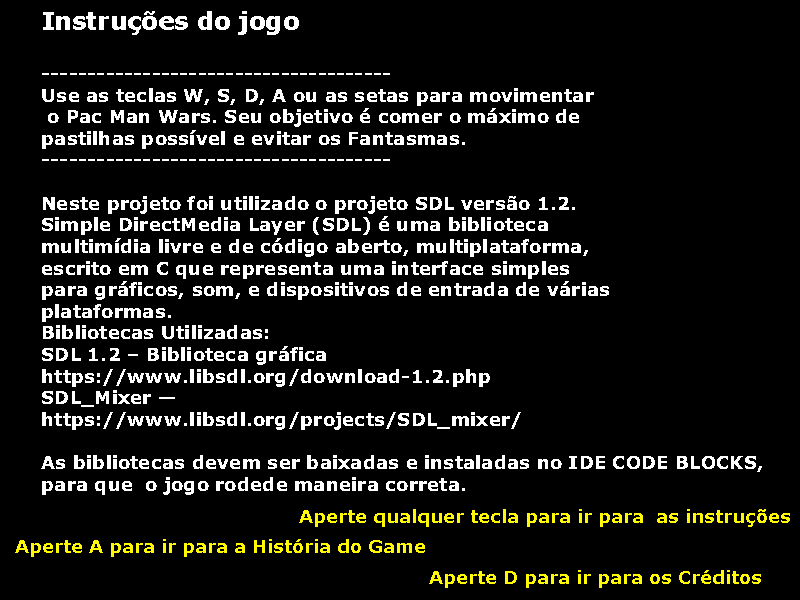
<style>
.page{position:relative;width:800px;height:600px;background:#000000}
.page>*{position:absolute;margin:0}
.t1{font:18px "Verdana-Bold";color:#ffffff}
.t2{font:24px "Verdana-Bold";color:#ffffff}
.t3{font:18px "Verdana-Bold";color:#fffa03}
</style>
<div class="page">
<p class="t1" style="left:41px;top:11px;width:721px;height:484px"><span class="t2">Instruções do jogo<br><br></span>--------------------------------------<br>Use as teclas W, S, D, A ou as setas para movimentar<br> o Pac Man Wars. Seu objetivo é comer o máximo de <br>pastilhas possível e evitar os Fantasmas.<br>--------------------------------------<br><br>Neste projeto foi utilizado o projeto SDL versão 1.2.<br>Simple DirectMedia Layer (SDL) é uma biblioteca<br>multimídia livre e de código aberto, multiplataforma,<br>escrito em C que representa uma interface simples<br>para gráficos, som, e dispositivos de entrada de várias<br>plataformas.<br>Bibliotecas Utilizadas:<br>SDL 1.2 – Biblioteca gráfica<br>https://www.libsdl.org/download-1.2.php<br>SDL_Mixer — <br>https://www.libsdl.org/projects/SDL_mixer/<br><br>As bibliotecas devem ser baixadas e instaladas no IDE CODE BLOCKS,<br>para que  o jogo rodede maneira correta.</p>
<p class="t3" style="left:299px;top:509px;width:491px;height:18px">Aperte qualquer tecla para ir para  as instruções</p>
<p class="t3" style="left:15px;top:539px;width:410px;height:18px">Aperte A para ir para a História do Game</p>
<p class="t3" style="left:429px;top:570px;width:332px;height:18px">Aperte D para ir para os Créditos</p>
</div>
